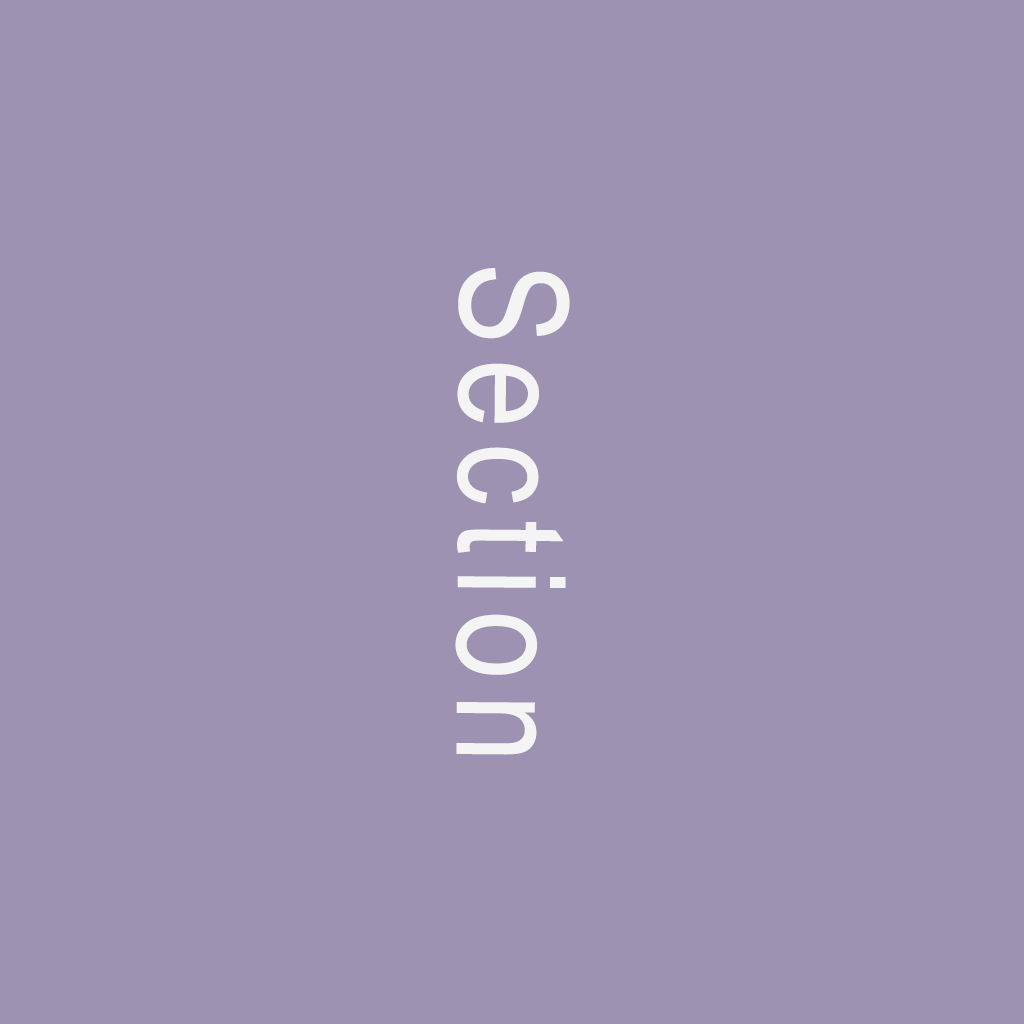
<style>
.page{position:relative;width:1024px;height:1024px;background:#9d92b2}
.page>*{position:absolute;margin:0}
.t1{font:150px "ArialNarrow";letter-spacing:0.1em;color:#f4f4f4}
</style>
<div class="page">
<p class="t1" style="left:455px;top:268px;width:115px;height:487px;rotate:90deg">Section</p>
</div>
